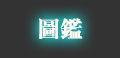
<style>
.page{position:relative;width:120px;height:58px;background:#333333}
.page>*{position:absolute;margin:0}
.t1{font:22px "RyuminPr6N-ExBold";color:#fbf8f3;font-weight:bold}
</style>
<div class="page">
<p class="t1" style="left:39px;top:18px;width:44px;height:21px">圖鑑</p>
</div>
